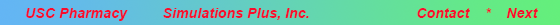
<style>
.page{position:relative;width:560px;height:25px}
.page>*{position:absolute;margin:0}
.t1{font:14.2px "Arial-BoldItalicMT";color:#f60e2e}
</style>
<div class="page">
<p class="t1" style="left:26px;top:8px;width:512px;height:13px">USC Pharmacy         Simulations Plus, Inc.                           Contact    *    Next</p>
</div>
